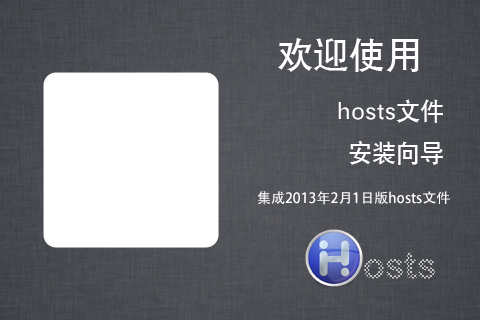
<style>
.page{position:relative;width:480px;height:320px;background:#ffffff}
.page>*{position:absolute;margin:0}
.t1{font:36px "SIL-Hei-Med-Jian";color:#ffffff}
.t2{font:24px "SIL-Hei-Med-Jian";color:#ffffff}
.t3{font:14px "AdobeHeitiStd-Regular";color:#ffffff}
.t4{font:36px "ArialRoundedMTBold"}
</style>
<div class="page">
<p class="t1" style="left:278px;top:38px;width:141px;height:34px">欢迎使用</p>
<p class="t2" style="left:338px;top:99px;width:105px;height:66px;text-align:right">hosts文件<br>安装向导</p>
<p class="t3" style="left:257px;top:191px;width:193px;height:14px">集成2013年2月1日版hosts文件</p>
<p class="t4" style="left:364px;top:252px;width:71px;height:27px">osts</p>
</div>
